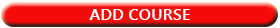
<style>
.page{position:relative;width:280px;height:28px;background:#f60b0b}
.page>*{position:absolute;margin:0}
.t1{font:16.4px "YuGothicUI-Bold";color:#ffffff}
</style>
<div class="page">
<p class="t1" style="left:89px;top:9px;width:101px;height:11px">ADD COURSE</p>
</div>
